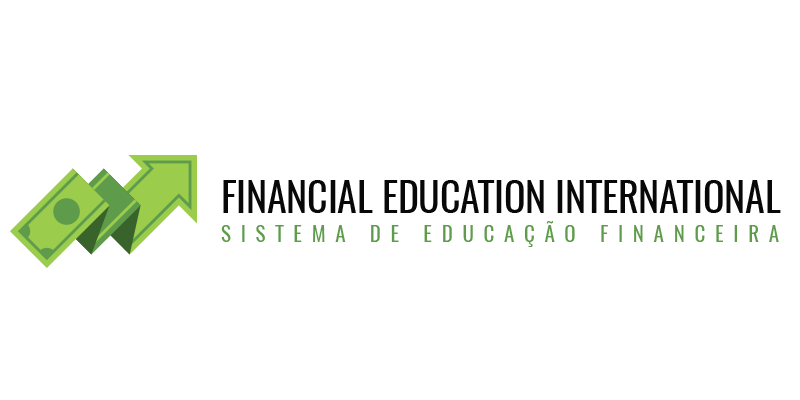
<style>
.page{position:relative;width:800px;height:400px;background:#ffffff}
.page>*{position:absolute;margin:0}
.t1{font:39.6px "Oswald-Regular";color:#080808}
.t2{font:20.8px "Oswald-Regular";letter-spacing:0.47em;color:#5e9c4b}
</style>
<div class="page">
<p class="t1" style="left:223px;top:180px;width:558px;height:33px">FINANCIAL EDUCATION INTERNATIONAL</p>
<p class="t2" style="left:221px;top:221px;width:558px;height:26px">SISTEMA DE EDUCAÇÃO FINANCEIRA</p>
</div>
